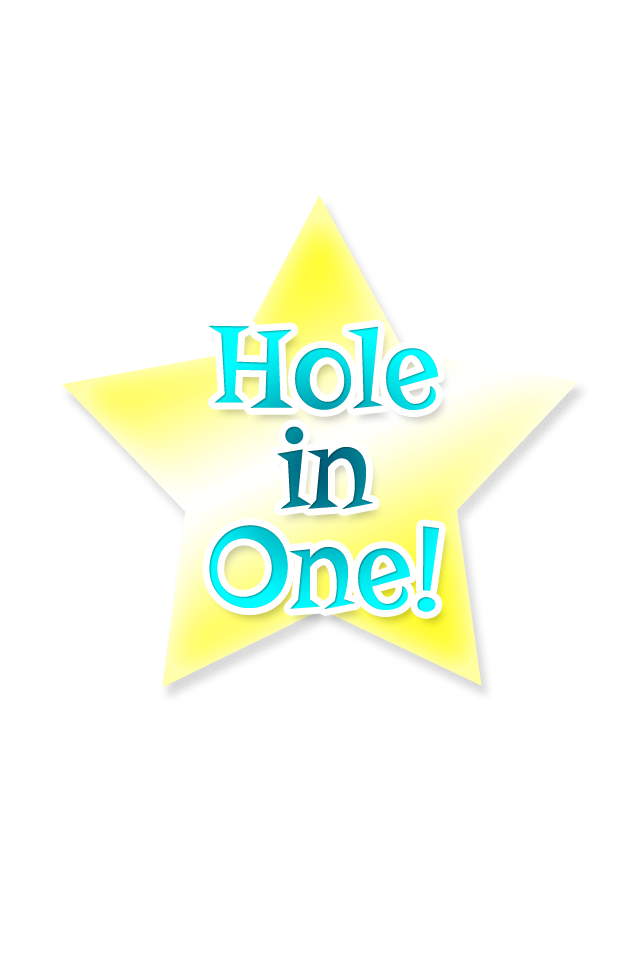
<style>
.page{position:relative;width:640px;height:960px;background:#ffffff}
.page>*{position:absolute;margin:0}
.t1{font:120px/100px "Risque-Regular"}
</style>
<div class="page">
<p class="t1" style="left:208px;top:325px;width:231px;height:287px;text-align:center">Hole<br>in<br>One!</p>
</div>
